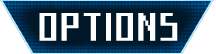
<style>
.page{position:relative;width:216px;height:54px;background:#ffffff}
.page>*{position:absolute;margin:0}
.t1{font:36.2px "Starcadia";color:#ffffff;font-weight:bold;scale:0.95 1}
</style>
<div class="page">
<p class="t1" style="left:39px;top:13px;width:139px;height:28px">OPTIONS</p>
</div>
